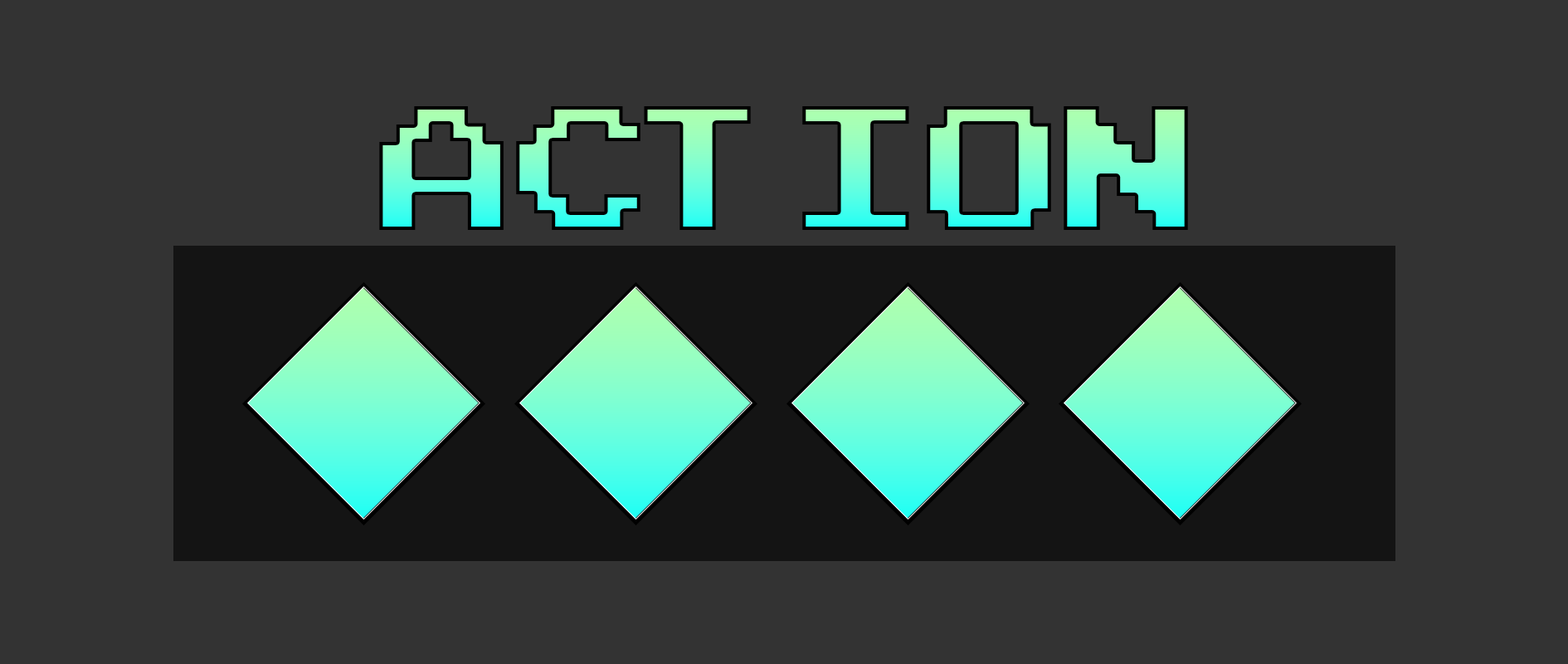
<style>
.page{position:relative;width:1568px;height:664px;background:#333333}
.page>*{position:absolute;margin:0}
.t1{font:248.9px "ArcadeClassic"}
</style>
<div class="page">
<p class="t1" style="left:379px;top:106px;width:809px;height:124px">ACTION</p>
</div>
